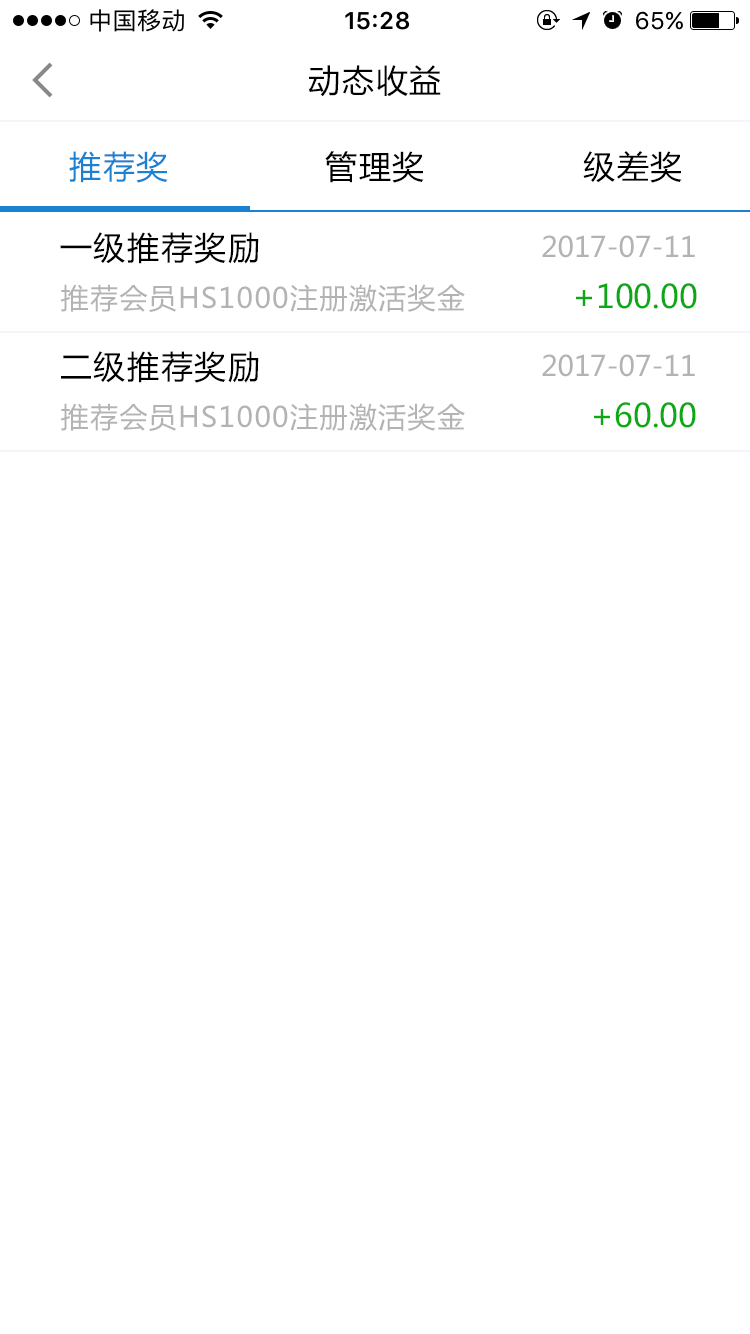
<style>
.page{position:relative;width:750px;height:1334px;background:#ffffff}
.page>*{position:absolute;margin:0}
.t1{font:32px "MicrosoftYaHei";letter-spacing:0.05em;color:#000000}
.t2{font:32px "MicrosoftYaHei";letter-spacing:0.05em;color:#1b82d2}
.t3{font:28px "MicrosoftYaHei";color:#b3b3b3}
.t4{font:28px "MicrosoftYaHei";letter-spacing:0.05em;color:#b3b3b3}
.t5{font:32px "MicrosoftYaHei";color:#0da914}
</style>
<div class="page">
<p class="t1" style="left:308px;top:65px;width:133px;height:32px">动态收益</p>
<p class="t2" style="left:69px;top:151px;width:99px;height:32px">推荐奖</p>
<p class="t1" style="left:325px;top:151px;width:99px;height:32px">管理奖</p>
<p class="t1" style="left:583px;top:151px;width:99px;height:32px">级差奖</p>
<p class="t1" style="left:60px;top:232px;width:199px;height:32px">一级推荐奖励</p>
<p class="t3" style="left:542px;top:235px;width:153px;height:23px">2017-07-11</p>
<p class="t4" style="left:61px;top:284px;width:404px;height:28px">推荐会员HS1000注册激活奖金</p>
<p class="t5" style="left:576px;top:283px;width:121px;height:26px">+100.00</p>
<p class="t1" style="left:61px;top:351px;width:198px;height:32px">二级推荐奖励</p>
<p class="t3" style="left:542px;top:354px;width:153px;height:23px">2017-07-11</p>
<p class="t4" style="left:61px;top:403px;width:404px;height:28px">推荐会员HS1000注册激活奖金</p>
<p class="t5" style="left:594px;top:402px;width:102px;height:26px">+60.00</p>
</div>
